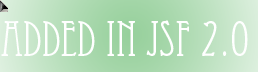
<style>
.page{position:relative;width:258px;height:72px}
.page>*{position:absolute;margin:0}
.t1{font:48px "Eccentric";color:#ffffff}
</style>
<div class="page">
<p class="t1" style="left:1px;top:20px;width:247px;height:36px">Added in JSF 2.0</p>
</div>
